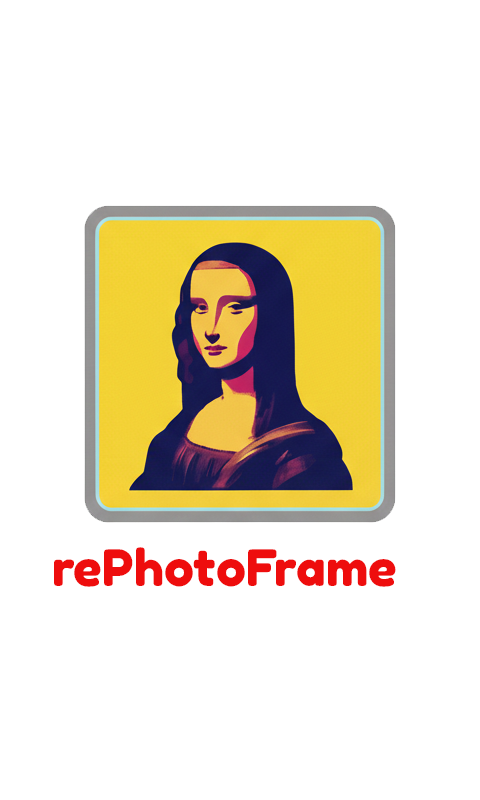
<style>
.page{position:relative;width:480px;height:800px;background:#ffffff}
.page>*{position:absolute;margin:0}
.t1{font:50px "FredokaOne-Regular";color:#ee0d0d}
</style>
<div class="page">
<p class="t1" style="left:54px;top:547px;width:342px;height:40px">rePhotoFrame</p>
</div>
